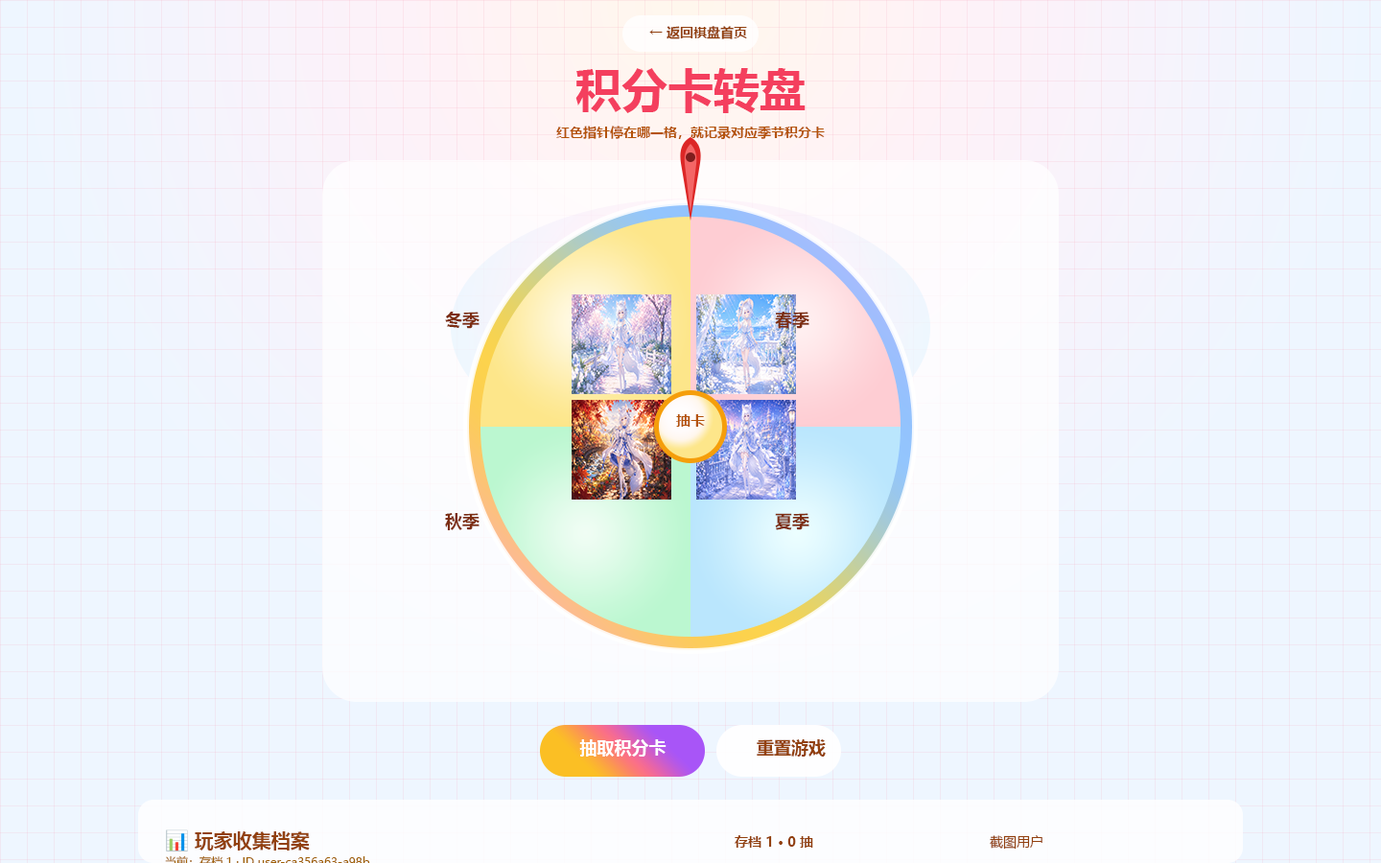
<style>
.page{position:relative;width:1381px;height:863px;background:#eef6ff}
.page>*{position:absolute;margin:0}
.t1{font:13.4px "MicrosoftYaHei-Bold";color:#92400e}
.t2{font:46px "MicrosoftYaHei-Bold";color:#f43f5e}
.t3{font:13.4px "MicrosoftYaHei-Bold";color:#b45309}
.t4{font:17.3px "MicrosoftYaHei-Bold";color:#7c2d12}
.t5{font:14.4px "MicrosoftYaHei-Bold";color:#b45309}
.t6{font:17.3px "MicrosoftYaHei-Bold";color:#ffffff}
.t7{font:17.3px "MicrosoftYaHei-Bold";color:#92400e}
.t8{font:19.2px "MicrosoftYaHei-Bold";color:#92400e}
.t9{font:19.2px "NotoColorEmoji-SVG";color:#92400e}
.t10{font:13.4px "MicrosoftYaHei";color:#92400e}
</style>
<div class="page">
<p class="t1" style="left:649px;top:26px;width:98px;height:13px">← 返回棋盘首页</p>
<p class="t2" style="left:576px;top:68px;width:230px;height:45px">积分卡转盘</p>
<p class="t3" style="left:556px;top:126px;width:269px;height:13px">红色指针停在哪一格，就记录对应季节积分卡</p>
<p class="t4" style="left:445px;top:312px;width:35px;height:17px">冬季</p>
<p class="t4" style="left:775px;top:312px;width:35px;height:17px">春季</p>
<p class="t5" style="left:676px;top:414px;width:29px;height:13px">抽卡</p>
<p class="t4" style="left:445px;top:513px;width:35px;height:17px">秋季</p>
<p class="t4" style="left:775px;top:513px;width:35px;height:17px">夏季</p>
<p class="t6" style="left:579px;top:740px;width:88px;height:17px">抽取积分卡</p>
<p class="t7" style="left:757px;top:740px;width:69px;height:17px">重置游戏</p>
<p class="t8" style="left:166px;top:830px;width:144px;height:22px"><span class="t9">📊</span> 玩家收集档案</p>
<p class="t1" style="left:735px;top:835px;width:78px;height:13px">存档 1 · 0 抽</p>
<p class="t10" style="left:990px;top:835px;width:53px;height:15px">截图用户</p>
</div>
